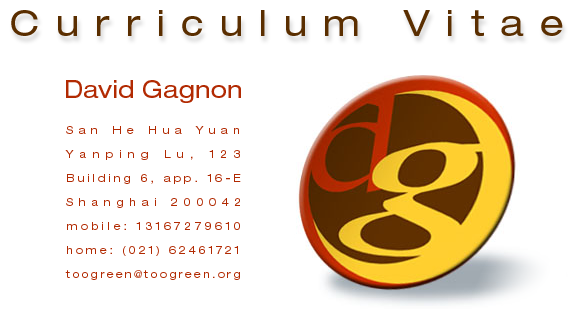
<style>
.page{position:relative;width:579px;height:309px;background:#ffffff}
.page>*{position:absolute;margin:0}
.t1{font:36px "HelveticaNeue-Extended";letter-spacing:0.45em;color:#5a2e00}
.t2{font:24px "HelveticaNeue-Extended";color:#b22a02}
.t3{font:11.1px/24px "HelveticaNeue-Extended";letter-spacing:0.25em;color:#b22a02}
.t4{font:11.1px/24px "HelveticaNeue-Extended";letter-spacing:0.46em;color:#b22a02}
.t5{font:11.1px/24px "HelveticaNeue-Extended";letter-spacing:0.535em;color:#b22a02}
.t6{font:11.1px/24px "HelveticaNeue-Extended";letter-spacing:0.475em;color:#b22a02}
.t7{font:11.1px/24px "HelveticaNeue-Extended";letter-spacing:0.28em;color:#b22a02}
.t8{font:11.1px/24px "HelveticaNeue-Extended";letter-spacing:0.22em;color:#b22a02}
.t9{font:11.1px/24px "HelveticaNeue-Extended";letter-spacing:0.16em;color:#b22a02}
</style>
<div class="page">
<p class="t1" style="left:11px;top:10px;width:552px;height:26px">Curriculum Vitae</p>
<p class="t2" style="left:66px;top:80px;width:175px;height:23px">David Gagnon</p>
<p class="t3" style="left:65px;top:126px;width:176px;height:154px"><span class="t4">San He Hua Yuan<br></span><span class="t5">Yanping Lu, 123<br></span>Building 6, app. 16-E<br><span class="t6">Shanghai 200042<br></span><span class="t7">mobile: 13167279610<br></span><span class="t8">home: (021) 62461721<br></span><span class="t9">toogreen@toogreen.org</span></p>
</div>
